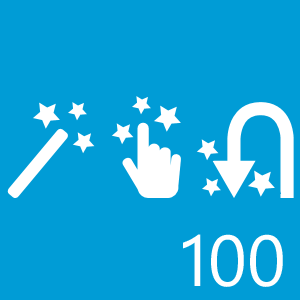
<style>
.page{position:relative;width:300px;height:300px;background:#009cd6}
.page>*{position:absolute;margin:0}
.t1{font:72px "SegoeWP";color:#ffffff}
</style>
<div class="page">
<p class="t1" style="left:183px;top:234px;width:100px;height:53px">100</p>
</div>
